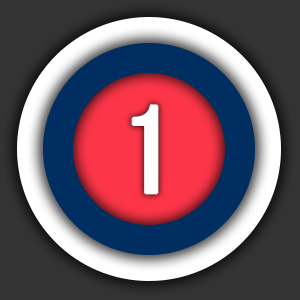
<style>
.page{position:relative;width:300px;height:300px;background:#333333}
.page>*{position:absolute;margin:0}
.t1{font:113px "MS-Gothic";color:#ffffff;font-weight:bold}
</style>
<div class="page">
<p class="t1" style="left:131px;top:104px;width:28px;height:91px">1</p>
</div>
